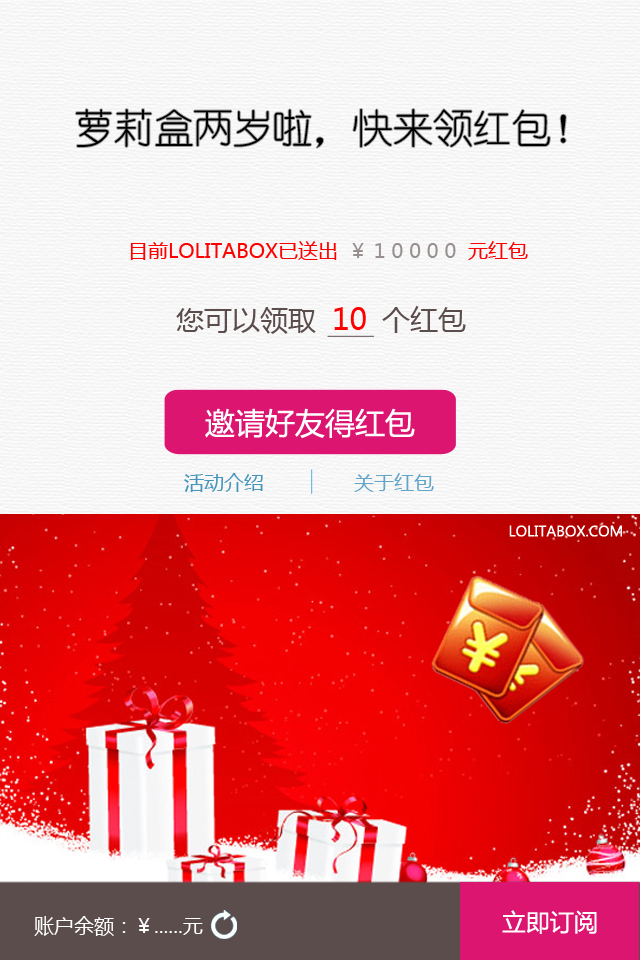
<style>
.page{position:relative;width:640px;height:960px}
.page>*{position:absolute;margin:0}
.t1{font:39.8px "YouYuan";color:#000000}
.t2{font:20px "MicrosoftYaHei";color:#fe0000}
.t3{font:20px "MicrosoftYaHei";color:#ff0000}
.t4{font:20px "MicrosoftYaHei";color:#988f8f}
.t5{font:28px "MicrosoftYaHei";color:#5c4d4d}
.t6{font:30px "MicrosoftYaHei";color:#ff0000}
.t7{font:30px "MicrosoftYaHei";color:#ffffff}
.t8{font:20px "MicrosoftYaHei";color:#4695bd}
.t9{font:20px "MicrosoftYaHei";color:#62a5c8}
.t10{font:14px "MicrosoftYaHei";color:#ffffff}
.t11{font:20px "MicrosoftYaHei";color:#ffffff}
.t12{font:20px "MicrosoftYaHei";color:#fffefe}
.t13{font:24px "MicrosoftYaHei";color:#ffffff}
</style>
<div class="page">
<p class="t1" style="left:75px;top:109px;width:491px;height:39px">萝莉盒两岁啦，快来领红包！</p>
<p class="t2" style="left:130px;top:241px;width:398px;height:19px">目前LOLITABOX已送出                      <span class="t3">元红包</span></p>
<p class="t4" style="left:352px;top:243px;width:104px;height:15px">￥ 1 0 0 0 0</p>
<p class="t5" style="left:176px;top:306px;width:290px;height:28px">您可以领取        个红包</p>
<p class="t6" style="left:334px;top:307px;width:32px;height:23px">10</p>
<p class="t7" style="left:205px;top:408px;width:210px;height:30px">邀请好友得红包</p>
<p class="t8" style="left:184px;top:473px;width:79px;height:19px">活动介绍</p>
<p class="t9" style="left:354px;top:473px;width:80px;height:19px">关于红包</p>
<p class="t10" style="left:509px;top:525px;width:113px;height:12px">LOLITABOX.COM</p>
<p class="t11" style="left:34px;top:916px;width:169px;height:20px">账户余额：<span class="t12">￥</span>......元</p>
<p class="t13" style="left:502px;top:910px;width:95px;height:24px">立即订阅</p>
</div>
